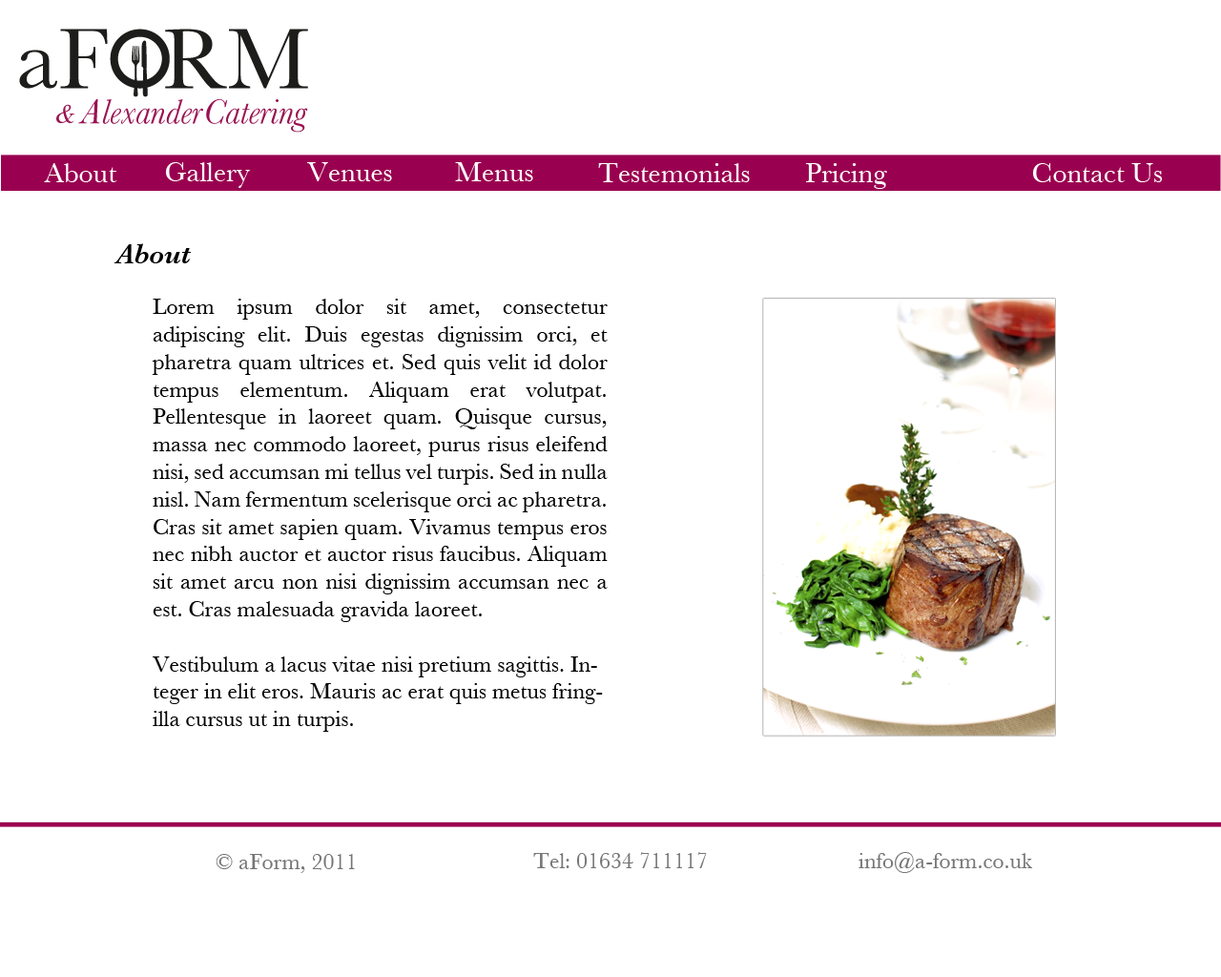
<style>
.page{position:relative;width:1221px;height:977px;background:#ffffff}
.page>*{position:absolute;margin:0}
.t1{font:28.6px "Baskerville";color:#ffffff}
.t2{font:28.6px "Baskerville-SemiBoldItalic";color:#010101}
.t3{font:22.9px "Baskerville";color:#010101}
.t4{font:22.9px "Baskerville";color:#767676}
</style>
<div class="page">
<p class="t1" style="left:44px;top:163px;width:73px;height:19px">About</p>
<p class="t1" style="left:165px;top:162px;width:85px;height:26px">Gallery</p>
<p class="t1" style="left:307px;top:162px;width:85px;height:19px">Venues</p>
<p class="t1" style="left:455px;top:162px;width:78px;height:19px">Menus</p>
<p class="t1" style="left:598px;top:163px;width:152px;height:19px">Testemonials</p>
<p class="t1" style="left:805px;top:163px;width:82px;height:26px">Pricing</p>
<p class="t1" style="left:1032px;top:163px;width:131px;height:19px">Contact Us</p>
<p class="t2" style="left:114px;top:243px;width:78px;height:20px">About</p>
<p class="t3" style="left:152px;top:299px;width:456px;height:433px;text-align:justify">Lorem ipsum dolor sit amet, consectetur adipiscing elit. Duis egestas dignissim orci, et pharetra quam ultrices et. Sed quis velit id dolor tempus elementum. Aliquam erat volutpat. Pellentesque in laoreet quam. Quisque cursus, massa nec commodo laoreet, purus risus eleifend nisi, sed accumsan mi tellus vel turpis. Sed in nulla nisl. Nam fermentum scelerisque orci ac pharetra. Cras sit amet sapien quam. Vivamus tempus eros nec nibh auctor et auctor risus faucibus. Aliquam sit amet arcu non nisi dignissim accumsan nec a est. Cras malesuada gravida laoreet.<br><br>Vestibulum a lacus vitae nisi pretium sagittis. Integer in elit eros. Mauris ac erat quis metus fringilla cursus ut in turpis.</p>
<p class="t4" style="left:216px;top:854px;width:139px;height:19px">© aForm, 2011</p>
<p class="t4" style="left:533px;top:852px;width:174px;height:16px">Tel: 01634 711117</p>
<p class="t4" style="left:858px;top:852px;width:175px;height:21px">info@a-form.co.uk</p>
</div>
